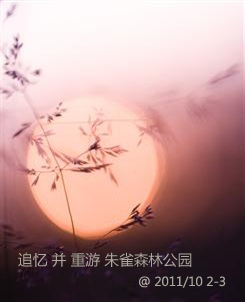
<style>
.page{position:relative;width:245px;height:302px}
.page>*{position:absolute;margin:0}
.t1{font:14.7px "MicrosoftYaHei";color:#aca89e}
.t2{font:13.3px "MicrosoftNewTaiLue";color:#aca89e}
</style>
<div class="page">
<p class="t1" style="left:18px;top:252px;width:174px;height:15px">追忆 并 重游 朱雀森林公园</p>
<p class="t2" style="left:139px;top:276px;width:87px;height:12px">@ 2011/10 2-3</p>
</div>
